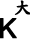
<style>
.page{position:relative;width:30px;height:39px;background:#ffffff}
.page>*{position:absolute;margin:0}
.t1{font:18px "DFKaiShu-SB-Estd-BF";color:#000000;font-weight:bold}
.t2{font:27px "ArialMT";color:#000000;font-weight:bold}
</style>
<div class="page">
<p class="t1" style="left:14px;top:0px;width:18px;height:15px">大</p>
<p class="t2" style="left:0px;top:18px;width:17px;height:21px">K</p>
</div>
